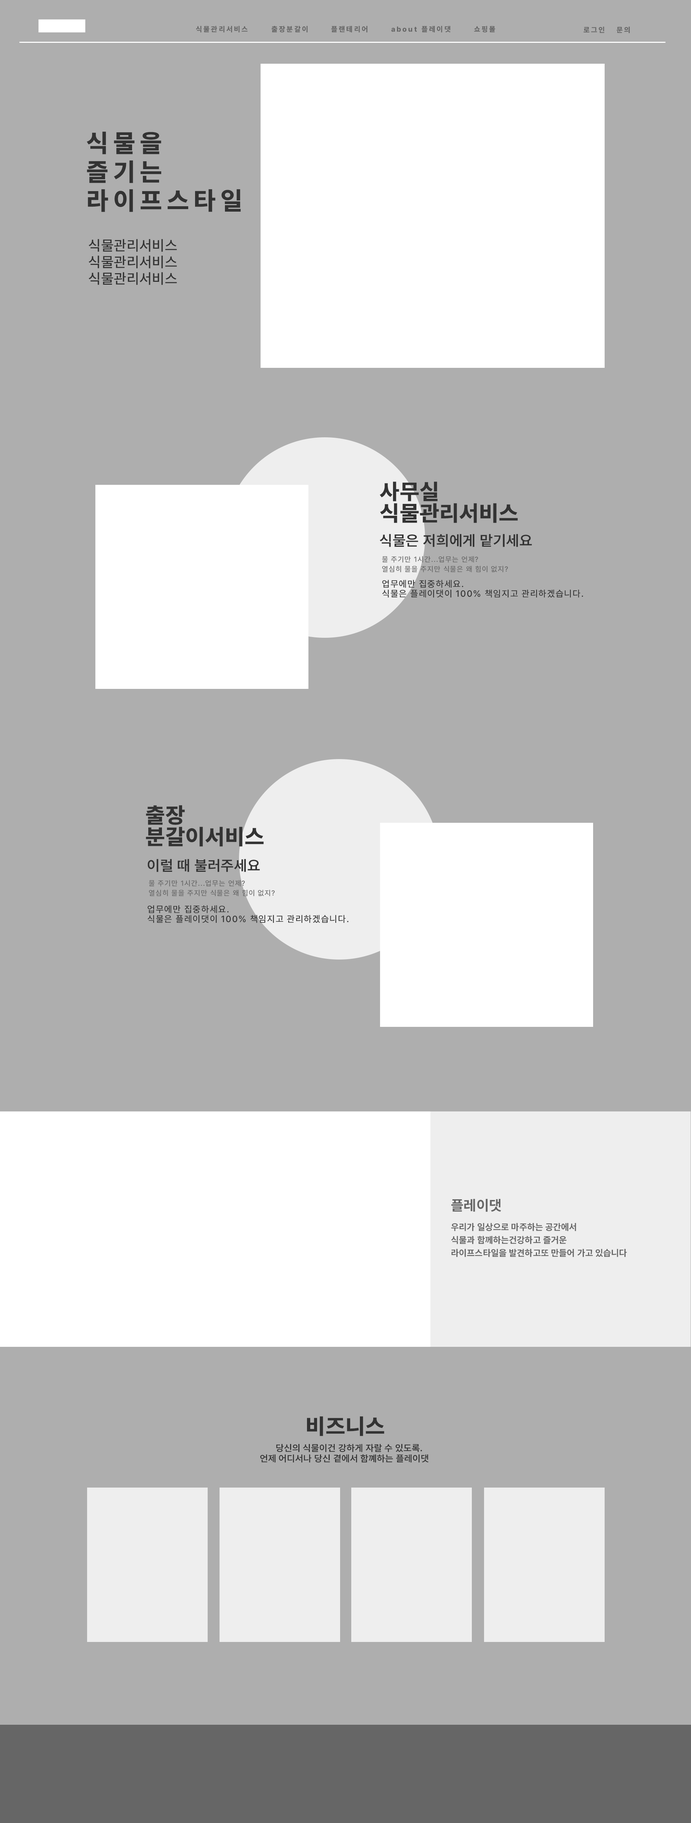
<style>
.page{position:relative;width:691px;height:1823px;background:#aeaeae}
.page>*{position:absolute;margin:0}
.t1{font:7.2px "Pretendard-ExtraBold";letter-spacing:0.2em;color:#666666}
.t2{font:25.2px/28.8px "Pretendard-ExtraBold";letter-spacing:0.2em;color:#333333}
.t3{font:14.4px "Pretendard-Medium";letter-spacing:0.02em;color:#333333}
.t4{font:21.8px/21.6px "Pretendard-ExtraBold";letter-spacing:0.02em;color:#333333}
.t5{font:14.5px "Pretendard-SemiBold";letter-spacing:0.02em;color:#333333}
.t6{font:7.2px/9.7px "Pretendard-Medium";letter-spacing:0.08em;color:#666666}
.t7{font:9px/9.7px "Pretendard-Medium";letter-spacing:0.08em;color:#333333}
.t8{font:14.4px "Pretendard-Bold";letter-spacing:0.02em;color:#666666}
.t9{font:9px/6.5px "Pretendard-Bold";letter-spacing:0.02em;color:#666666}
.t10{font:21.8px "Pretendard-ExtraBold";letter-spacing:0.02em;color:#333333}
.t11{font:9.1px/10.4px "Pretendard-SemiBold";letter-spacing:0.02em;color:#333333}
</style>
<div class="page">
<p class="t1" style="left:196px;top:26px;width:52px;height:6px">식물관리서비스</p>
<p class="t1" style="left:271px;top:26px;width:37px;height:6px">출장분갈이</p>
<p class="t1" style="left:331px;top:26px;width:37px;height:6px">플랜테리어</p>
<p class="t1" style="left:391px;top:26px;width:60px;height:6px">about 플레이댓</p>
<p class="t1" style="left:474px;top:26px;width:21px;height:6px">쇼핑몰</p>
<p class="t1" style="left:584px;top:27px;width:20px;height:6px">로그인</p>
<p class="t1" style="left:617px;top:27px;width:13px;height:6px">문의</p>
<p class="t2" style="left:87px;top:131px;width:154px;height:81px">식물을<br>즐기는<br>라이프스타일</p>
<p class="t3" style="left:89px;top:239px;width:88px;height:13px">식물관리서비스</p>
<p class="t3" style="left:89px;top:256px;width:88px;height:13px">식물관리서비스</p>
<p class="t3" style="left:89px;top:272px;width:88px;height:13px">식물관리서비스</p>
<p class="t4" style="left:380px;top:482px;width:138px;height:41px">사무실<br>식물관리서비스</p>
<p class="t5" style="left:380px;top:534px;width:152px;height:13px">식물은 저희에게 맡기세요</p>
<p class="t6" style="left:382px;top:556px;width:126px;height:16px">물 주기만 1시간...업무는 언제?<br>열심히 물을 주지만 식물은 왜 힘이 없지?</p>
<p class="t7" style="left:382px;top:580px;width:201px;height:18px">업무에만 집중하세요.<br>식물은 플레이댓이 100% 책임지고 관리하겠습니다.</p>
<p class="t4" style="left:146px;top:805px;width:118px;height:42px">출장<br>분갈이서비스</p>
<p class="t5" style="left:148px;top:859px;width:112px;height:13px">이럴 때 불러주세요</p>
<p class="t6" style="left:149px;top:880px;width:126px;height:16px">물 주기만 1시간...업무는 언제?<br>열심히 물을 주지만 식물은 왜 힘이 없지?</p>
<p class="t7" style="left:148px;top:905px;width:200px;height:18px">업무에만 집중하세요.<br>식물은 플레이댓이 100% 책임지고 관리하겠습니다.</p>
<p class="t8" style="left:451px;top:1199px;width:50px;height:13px">플레이댓</p>
<p class="t9" style="left:451px;top:1223px;width:176px;height:34px">우리가 일상으로 마주하는 공간에서<br><br>식물과 함께하는건강하고 즐거운<br><br>라이프스타일을 발견하고또 만들어 가고 있습니다</p>
<p class="t10" style="left:307px;top:1417px;width:77px;height:19px">비즈니스</p>
<p class="t11" style="left:260px;top:1444px;width:169px;height:19px;text-align:center">당신의 식물이건 강하게 자랄 수 있도록.<br>언제 어디서나 당신 곁에서 함꼐하는 플레이댓</p>
</div>
